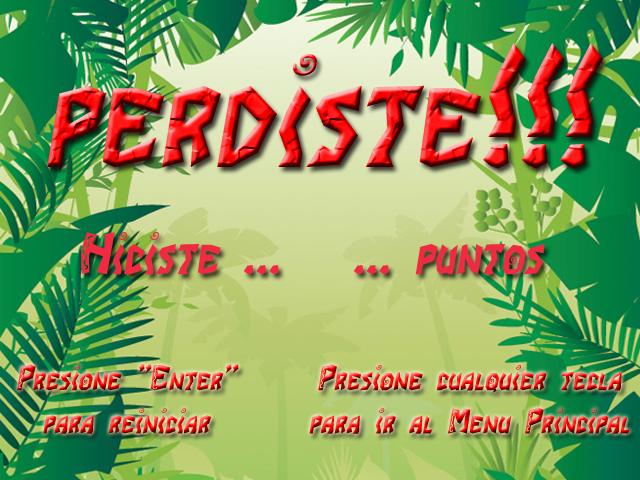
<style>
.page{position:relative;width:640px;height:480px}
.page>*{position:absolute;margin:0}
.t1{font:160px "JIBurrito";font-style:italic}
.t2{font:60px "JIBurrito";color:#f02a41;font-style:italic}
.t3{font:36px "JIBurrito";font-style:italic}
</style>
<div class="page">
<p class="t1" style="left:47px;top:43px;width:556px;height:126px">perdiste!!!</p>
<p class="t2" style="left:81px;top:232px;width:464px;height:43px">Hiciste ...   ... puntos</p>
<p class="t3" style="left:17px;top:364px;width:222px;height:70px;text-align:center">Presione "Enter" para reiniciar</p>
<p class="t3" style="left:309px;top:364px;width:321px;height:70px;text-align:center">Presione cualquier tecla para ir al Menu Principal</p>
</div>
